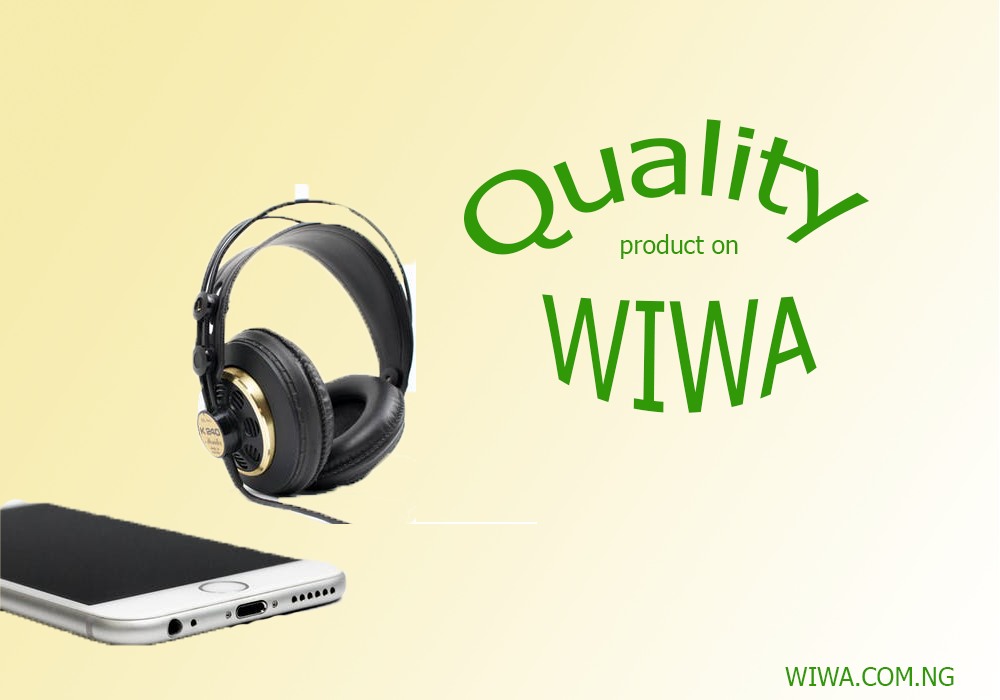
<style>
.page{position:relative;width:1000px;height:700px}
.page>*{position:absolute;margin:0}
.t1{font:100px "Tahoma";color:#319908}
.t2{font:25px "Tahoma";color:#319908}
.t3{font:12px "Tahoma";color:#319908}
</style>
<div class="page">
<p class="t1" style="left:464px;top:119px;width:406px;height:136px">Quality</p>
<p class="t2" style="left:621px;top:234px;width:117px;height:25px">product on</p>
<p class="t1" style="left:542px;top:294px;width:275px;height:119px">WIWA</p>
<p class="t3" style="left:785px;top:667px;width:169px;height:19px">WIWA.COM.NG</p>
</div>
